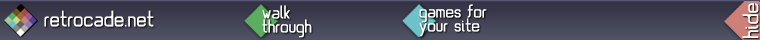
<style>
.page{position:relative;width:760px;height:40px}
.page>*{position:absolute;margin:0}
.t1{font:20px/14px "evereverse";color:#ffffff}
.t2{font:23.8px "evereverse";color:#ffffff;scale:1.09 1}
.t3{font:24px "evereverse";color:#ffffff}
</style>
<div class="page">
<p class="t1" style="left:262px;top:5px;width:50px;height:33px">walk<br>through</p>
<p class="t1" style="left:419px;top:4px;width:68px;height:33px">games for<br>your site</p>
<p class="t2" style="left:742px;top:3px;width:17px;height:35px;rotate:-90deg">hide</p>
<p class="t3" style="left:44px;top:10px;width:110px;height:17px">retrocade.net</p>
</div>
